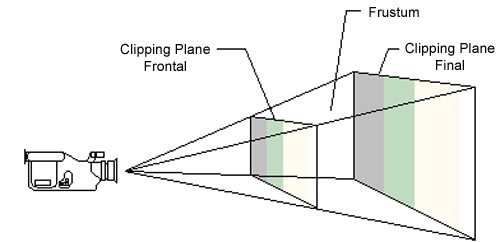
<style>
.page{position:relative;width:500px;height:242px;background:#ffffff}
.page>*{position:absolute;margin:0}
.t1{font:14px "ArialMT";color:#000000}
</style>
<div class="page">
<p class="t1" style="left:369px;top:7px;width:50px;height:10px">Frustum</p>
<p class="t1" style="left:120px;top:43px;width:90px;height:28px;text-align:center">Clipping Plane<br>Frontal</p>
<p class="t1" style="left:405px;top:42px;width:90px;height:28px;text-align:center">Clipping Plane<br>Final</p>
</div>
